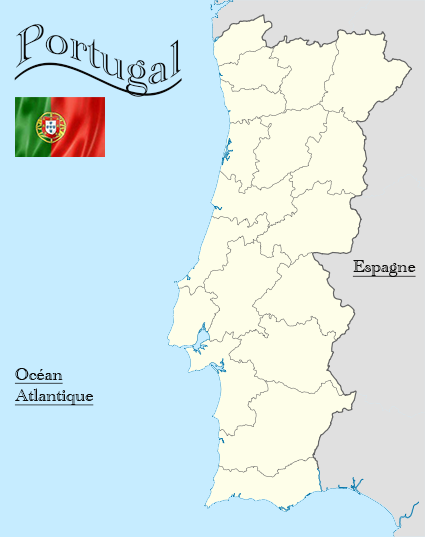
<style>
.page{position:relative;width:425px;height:537px;background:#c6ecff}
.page>*{position:absolute;margin:0}
.t1{font:48px "AcademyEngravedLetPlain";color:#0a0908;text-decoration:underline}
.t2{font:18px "AcademyEngravedLetPlain";color:#0a0908;text-decoration:underline}
</style>
<div class="page">
<p class="t1" style="left:14px;top:24px;width:168px;height:73px">Portugal</p>
<p class="t2" style="left:352px;top:260px;width:64px;height:17px">Espagne</p>
<p class="t2" style="left:14px;top:368px;width:80px;height:38px">Océan<br>Atlantique</p>
</div>
